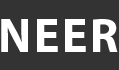
<style>
.page{position:relative;width:119px;height:70px;background:#333333}
.page>*{position:absolute;margin:0}
.t1{font:48.7px "MyriadPro-Bold";letter-spacing:0.05em;color:#ffffff}
</style>
<div class="page">
<p class="t1" style="left:1px;top:19px;width:117px;height:33px">NEER</p>
</div>
